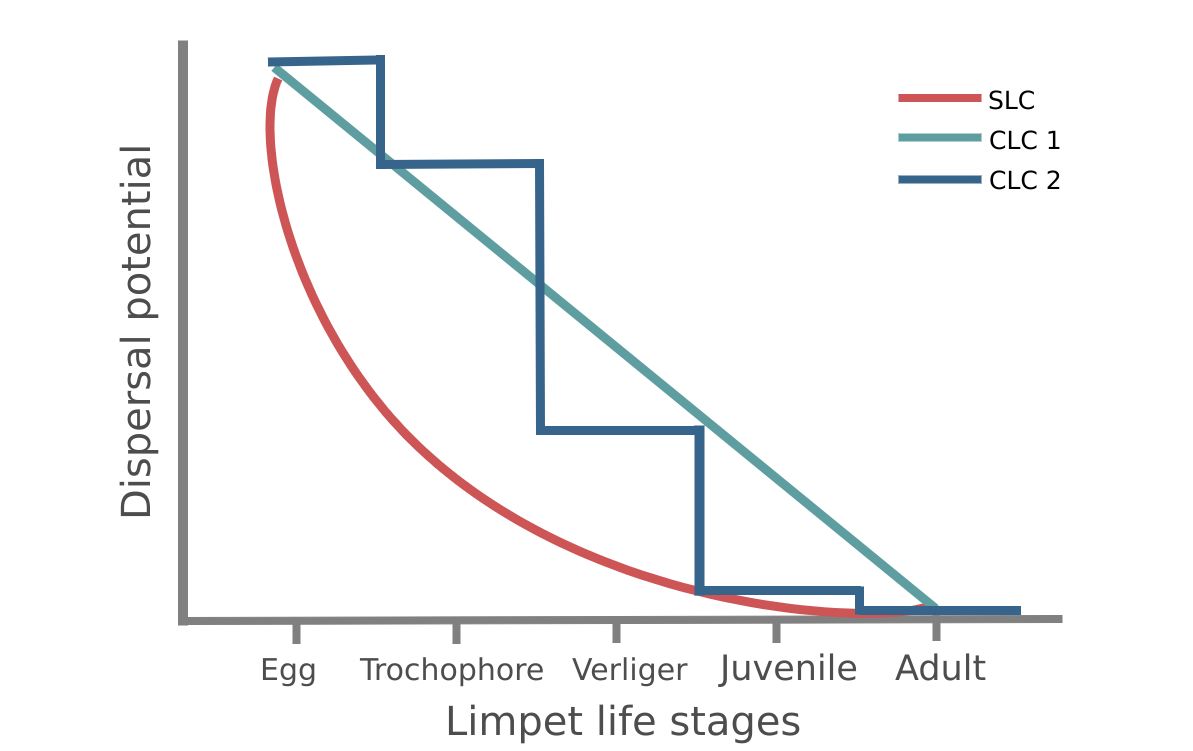
<style>
.page{position:relative;width:1193px;height:751px;background:#ffffff}
.page>*{position:absolute;margin:0}
.t1{font:25px "DejaVuSans";color:#000000}
.t2{font:40px "DejaVuSans";color:#4e4d4d}
.t3{font:35px "DejaVuSans";color:#4e4d4d}
.t4{font:30px "DejaVuSans";color:#4e4d4d}
</style>
<div class="page">
<p class="t1" style="left:989px;top:90px;width:45px;height:20px">SLC</p>
<p class="t1" style="left:990px;top:130px;width:70px;height:20px">CLC 1</p>
<p class="t2" style="left:119px;top:147px;width:40px;height:370px;rotate:-90deg">Dispersal potential</p>
<p class="t1" style="left:990px;top:170px;width:70px;height:20px">CLC 2</p>
<p class="t3" style="left:718px;top:653px;width:139px;height:35px">Juvenile</p>
<p class="t3" style="left:895px;top:653px;width:91px;height:28px">Adult</p>
<p class="t4" style="left:262px;top:658px;width:53px;height:29px">Egg</p>
<p class="t4" style="left:359px;top:657px;width:184px;height:30px">Trochophore</p>
<p class="t4" style="left:572px;top:657px;width:116px;height:30px">Verliger</p>
<p class="t2" style="left:448px;top:704px;width:352px;height:40px">Limpet life stages</p>
</div>
